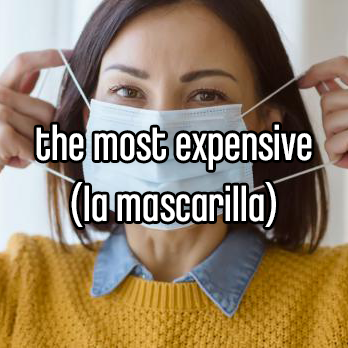
<style>
.page{position:relative;width:348px;height:348px}
.page>*{position:absolute;margin:0}
.t1{font:50.8px "ChaletComprime-CologneEighty";color:#ffffff}
</style>
<div class="page">
<p class="t1" style="left:36px;top:124px;width:276px;height:103px;text-align:center">the most expensive<br>(la mascarilla)</p>
</div>
